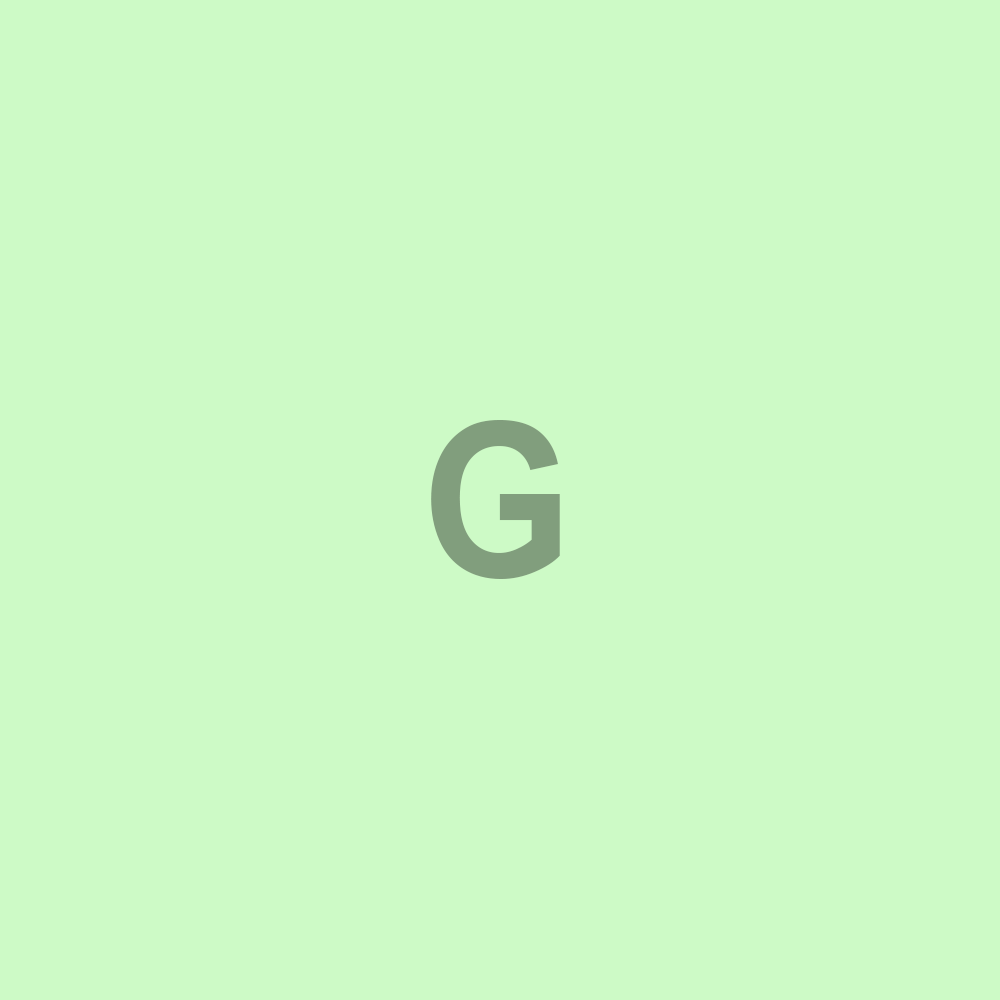
<style>
.page{position:relative;width:1000px;height:1000px;background:#cdfac6}
.page>*{position:absolute;margin:0}
.t1{font:213.4px "Arial-BoldMT";color:#819e7d;scale:0.9 1}
</style>
<div class="page">
<p class="t1" style="left:431px;top:420px;width:129px;height:159px">G</p>
</div>
